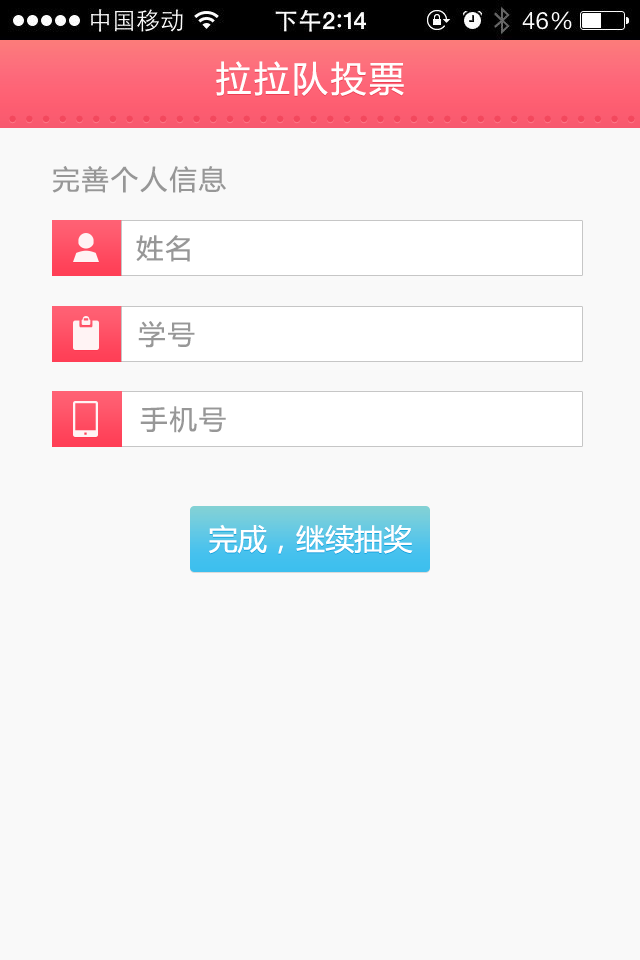
<style>
.page{position:relative;width:640px;height:960px;background:#f9f9f9}
.page>*{position:absolute;margin:0}
.t1{font:35.5px "MicrosoftYaHei";letter-spacing:0.08em;color:#fffefe}
.t2{font:52.1px "MicrosoftYaHei";letter-spacing:0.08em;color:#f3485d}
.t3{font:27.1px "MicrosoftYaHei";letter-spacing:0.08em;color:#979797}
.t4{font:29.2px "MicrosoftYaHei";color:#ffffff}
</style>
<div class="page">
<p class="t1" style="left:216px;top:61px;width:188px;height:35px">拉拉队投票</p>
<p class="t2" style="left:9px;top:115px;width:626px;height:8px">......................................</p>
<p class="t3" style="left:52px;top:166px;width:174px;height:27px">完善个人信息</p>
<p class="t3" style="left:136px;top:235px;width:54px;height:27px">姓名</p>
<p class="t3" style="left:138px;top:321px;width:57px;height:27px">学号</p>
<p class="t3" style="left:140px;top:406px;width:86px;height:27px">手机号</p>
<p class="t4" style="left:209px;top:524px;width:204px;height:30px">完成，继续抽奖</p>
</div>
